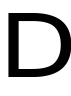
<style>
.page{position:relative;width:71px;height:96px;background:#ffffff}
.page>*{position:absolute;margin:0}
.t1{font:89.4px "MicrosoftSansSerif";color:#010101;scale:1.19 1}
</style>
<div class="page">
<p class="t1" style="left:8px;top:13px;width:64px;height:64px">D</p>
</div>
